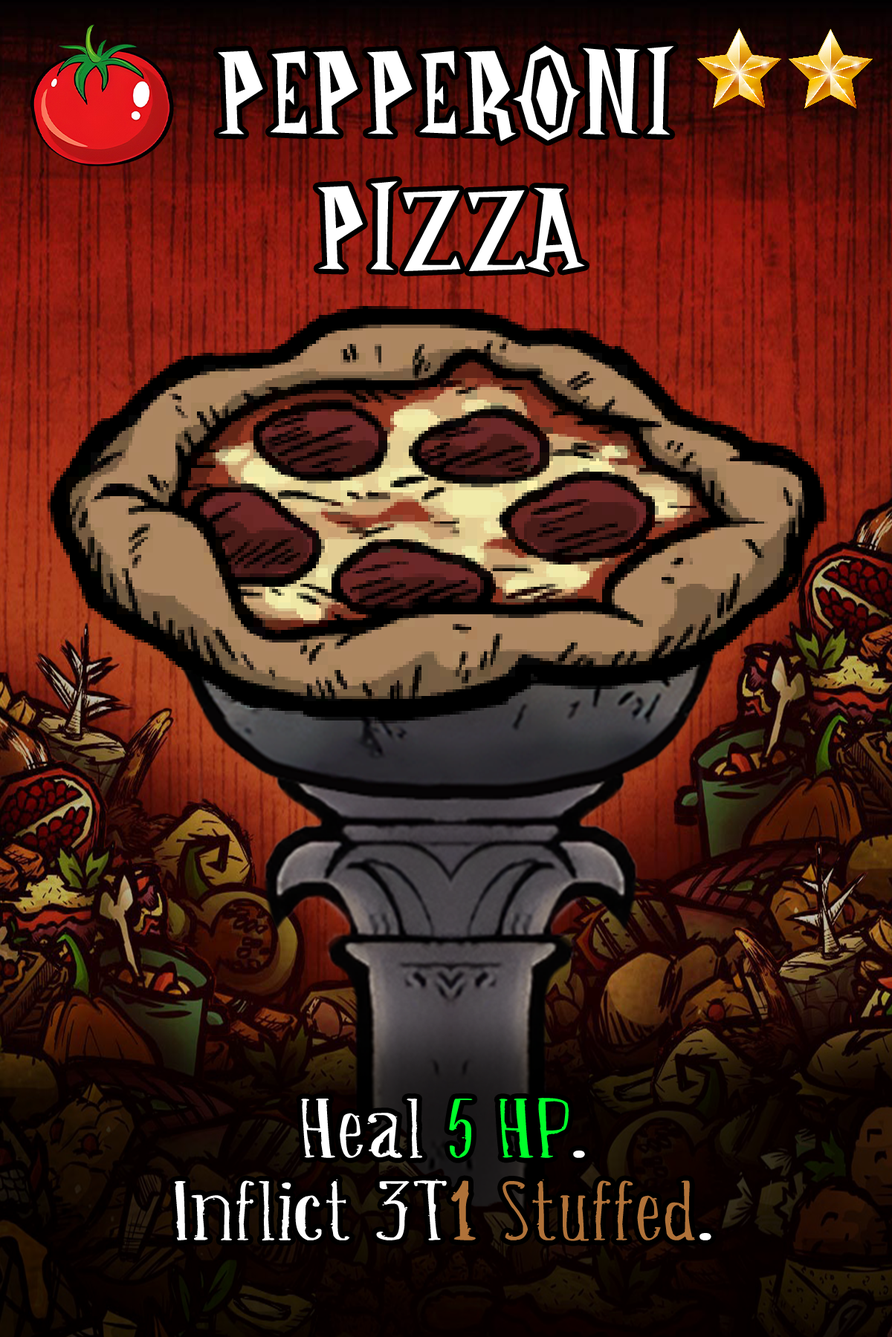
<style>
.page{position:relative;width:892px;height:1337px}
.page>*{position:absolute;margin:0}
.t1{font:222.9px/67.6px "DontStarveNameFont";color:#ffffff}
.t2{font:111.5px/82.5px "Belisaplumillamanual";color:#ffffff;scale:1.92 1}
.t3{font:111.5px/82.5px "Belisaplumillamanual";color:#00ff2a;scale:1.92 1}
.t4{font:111.5px/82.5px "Belisaplumillamanual";color:#b07239;scale:1.92 1}
</style>
<div class="page">
<p class="t1" style="left:218px;top:45px;width:455px;height:228px;text-align:center">Pepperoni<br><br>Pizza</p>
<p class="t2" style="left:175px;top:1098px;width:536px;height:144px;text-align:center">Heal <span class="t3">5 HP</span>.<br>Inflict 3T<span class="t4">1 Stuffed</span>.</p>
</div>
